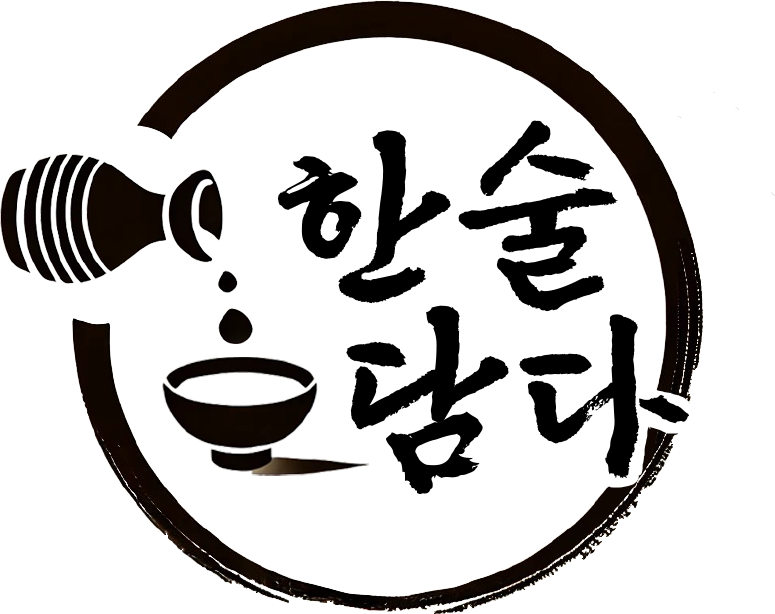
<style>
.page{position:relative;width:775px;height:614px;background:#ffffff}
.page>*{position:absolute;margin:0}
.t1{font:189.9px "Shilla_CultureB-Bold";color:#000000}
</style>
<div class="page">
<p class="t1" style="left:277px;top:120px;width:341px;height:192px">한술</p>
<p class="t1" style="left:346px;top:305px;width:344px;height:190px">담다</p>
</div>
